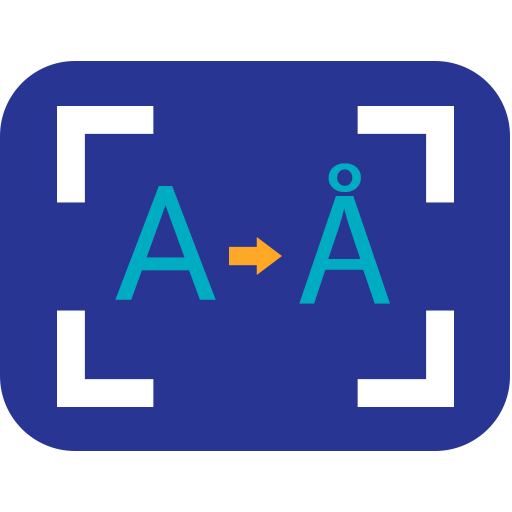
<style>
.page{position:relative;width:512px;height:512px;background:#283593}
.page>*{position:absolute;margin:0}
.t1{font:159.4px "MyriadPro-Regular";letter-spacing:0.04em;color:#00acc1}
.t2{font:159.4px "Roboto-Regular";letter-spacing:0.04em;color:#00acc1}
</style>
<div class="page">
<p class="t1" style="left:299px;top:163px;width:91px;height:141px">ÅÅÅ</p>
<p class="t2" style="left:115px;top:186px;width:101px;height:114px">A</p>
</div>
